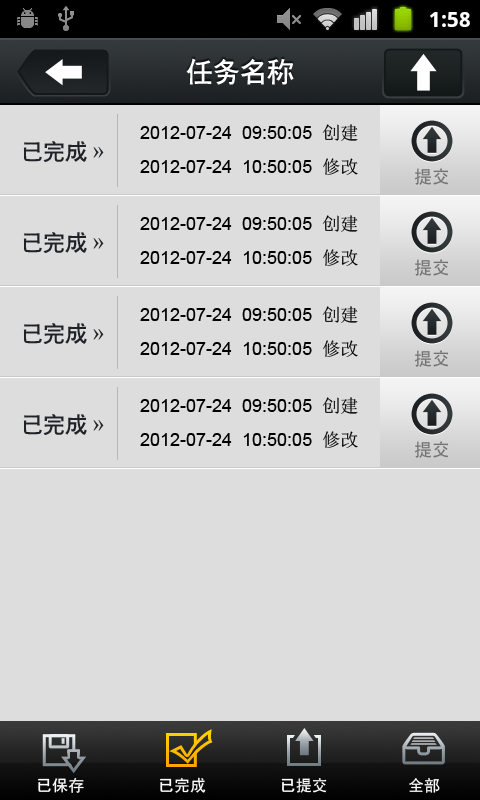
<style>
.page{position:relative;width:480px;height:800px;background:#dddddd}
.page>*{position:absolute;margin:0}
.t1{font:27px "CTCuHeiSJ";color:#ffffff}
.t2{font:18px "ArialMT";color:#000000}
.t3{font:18px "SimSun";color:#000000}
.t4{font:22px "CTCuHeiSJ";color:#1f2327}
.t5{font:22px "SimSun";color:#1f2327}
.t6{font:18px "SimHei";color:#747272}
.t7{font:16px "SimHei";color:#ffffff}
</style>
<div class="page">
<p class="t1" style="left:186px;top:58px;width:108px;height:27px">任务名称</p>
<p class="t2" style="left:140px;top:124px;width:218px;height:17px">2012-07-24  09:50:05  <span class="t3">创建</span></p>
<p class="t4" style="left:23px;top:141px;width:81px;height:21px">已完成 <span class="t5">»</span></p>
<p class="t2" style="left:140px;top:158px;width:218px;height:17px">2012-07-24  10:50:05  <span class="t3">修改</span></p>
<p class="t6" style="left:414px;top:168px;width:35px;height:17px">提交</p>
<p class="t2" style="left:140px;top:215px;width:218px;height:17px">2012-07-24  09:50:05  <span class="t3">创建</span></p>
<p class="t4" style="left:23px;top:232px;width:81px;height:21px">已完成 <span class="t5">»</span></p>
<p class="t2" style="left:140px;top:249px;width:218px;height:17px">2012-07-24  10:50:05  <span class="t3">修改</span></p>
<p class="t6" style="left:414px;top:259px;width:35px;height:17px">提交</p>
<p class="t2" style="left:140px;top:306px;width:218px;height:17px">2012-07-24  09:50:05  <span class="t3">创建</span></p>
<p class="t4" style="left:23px;top:323px;width:81px;height:21px">已完成 <span class="t5">»</span></p>
<p class="t2" style="left:140px;top:340px;width:218px;height:17px">2012-07-24  10:50:05  <span class="t3">修改</span></p>
<p class="t6" style="left:414px;top:350px;width:35px;height:17px">提交</p>
<p class="t2" style="left:140px;top:397px;width:218px;height:17px">2012-07-24  09:50:05  <span class="t3">创建</span></p>
<p class="t4" style="left:23px;top:414px;width:81px;height:21px">已完成 <span class="t5">»</span></p>
<p class="t2" style="left:140px;top:431px;width:218px;height:17px">2012-07-24  10:50:05  <span class="t3">修改</span></p>
<p class="t6" style="left:414px;top:441px;width:35px;height:17px">提交</p>
<p class="t7" style="left:38px;top:778px;width:46px;height:15px">已保存</p>
<p class="t7" style="left:160px;top:777px;width:46px;height:16px">已完成</p>
<p class="t7" style="left:281px;top:778px;width:46px;height:15px">已提交</p>
<p class="t7" style="left:409px;top:778px;width:31px;height:15px">全部</p>
</div>
